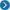
<style>
.page{position:relative;width:10px;height:10px;background:#126d9f}
.page>*{position:absolute;margin:0}
.t1{font:9px "·ÂËÎ"}
</style>
<div class="page">
<p class="t1" style="left:3px;top:2px;width:4px;height:6px">&gt;</p>
</div>
